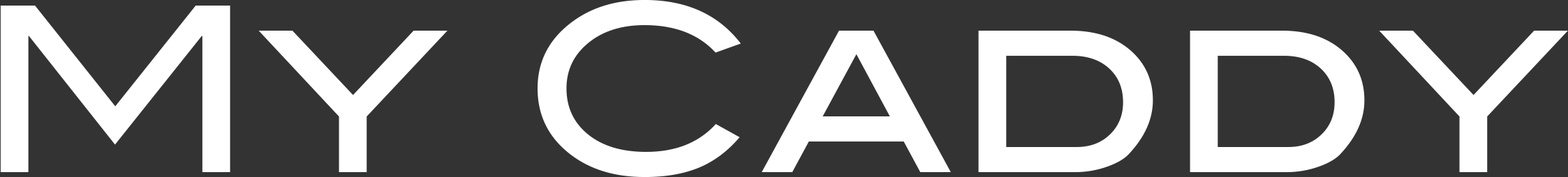
<style>
.page{position:relative;width:1568px;height:177px;background:#333333}
.page>*{position:absolute;margin:0}
.t1{font:230.4px "BlairMdITCTTMedium";color:#ffffff}
</style>
<div class="page">
<p class="t1" style="left:0px;top:0px;width:1568px;height:177px">My Caddy</p>
</div>
